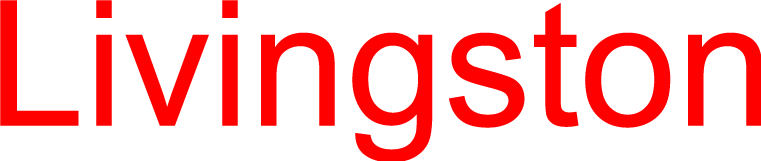
<style>
.page{position:relative;width:761px;height:161px;background:#ffffff}
.page>*{position:absolute;margin:0}
.t1{font:174.6px "ArialMT";color:#ff0000}
</style>
<div class="page">
<p class="t1" style="left:0px;top:0px;width:762px;height:163px">Livingston</p>
</div>
